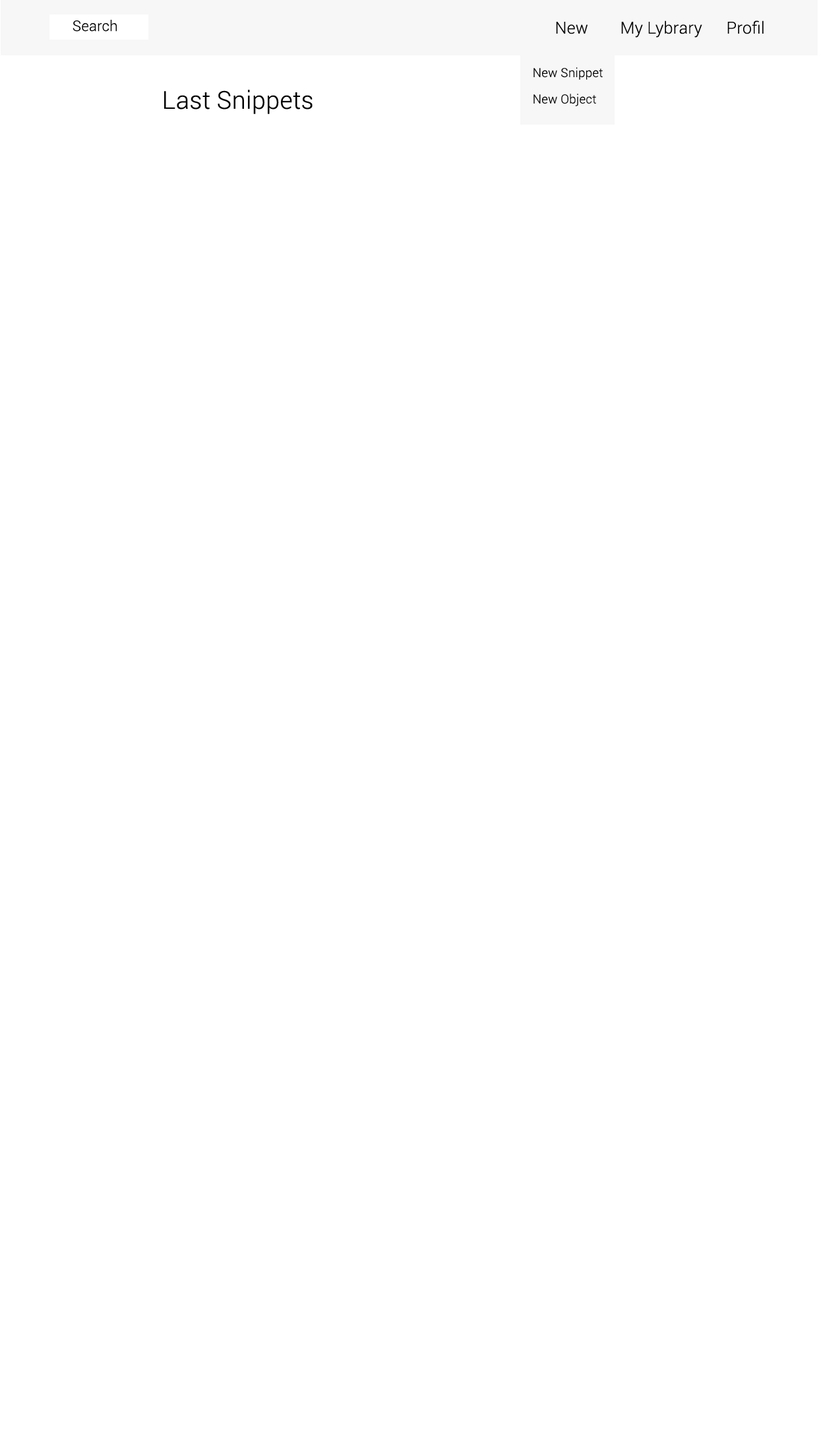
<style>
.page{position:relative;width:819px;height:1456px;background:#ffffff}
.page>*{position:absolute;margin:0}
.t1{font:14.6px "Roboto-Light";letter-spacing:0.01em;color:#000000}
.t2{font:16.6px "Roboto-Light";letter-spacing:0.01em;color:#000000}
.t3{font:12.4px "Roboto-Light";letter-spacing:0.01em;color:#000000}
.t4{font:24.7px "Roboto-Light";letter-spacing:0.01em;color:#000000}
</style>
<div class="page">
<p class="t1" style="left:73px;top:20px;width:44px;height:12px">Search</p>
<p class="t2" style="left:556px;top:22px;width:32px;height:12px">New</p>
<p class="t2" style="left:621px;top:20px;width:81px;height:18px">My Lybrary</p>
<p class="t2" style="left:727px;top:20px;width:37px;height:14px">Profil</p>
<p class="t3" style="left:533px;top:67px;width:70px;height:13px">New Snippet</p>
<p class="t4" style="left:164px;top:90px;width:149px;height:24px">Last Snippets</p>
<p class="t3" style="left:533px;top:94px;width:63px;height:12px">New Object</p>
</div>
